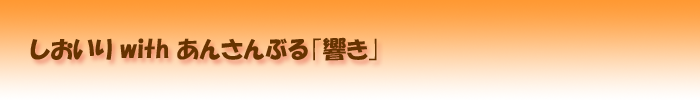
<style>
.page{position:relative;width:700px;height:100px}
.page>*{position:absolute;margin:0}
.t1{font:24px "HGPSoeiKakupoptai";color:#663300}
</style>
<div class="page">
<p class="t1" style="left:30px;top:37px;width:347px;height:24px">しおいり with あんさんぶる｢響き｣</p>
</div>
